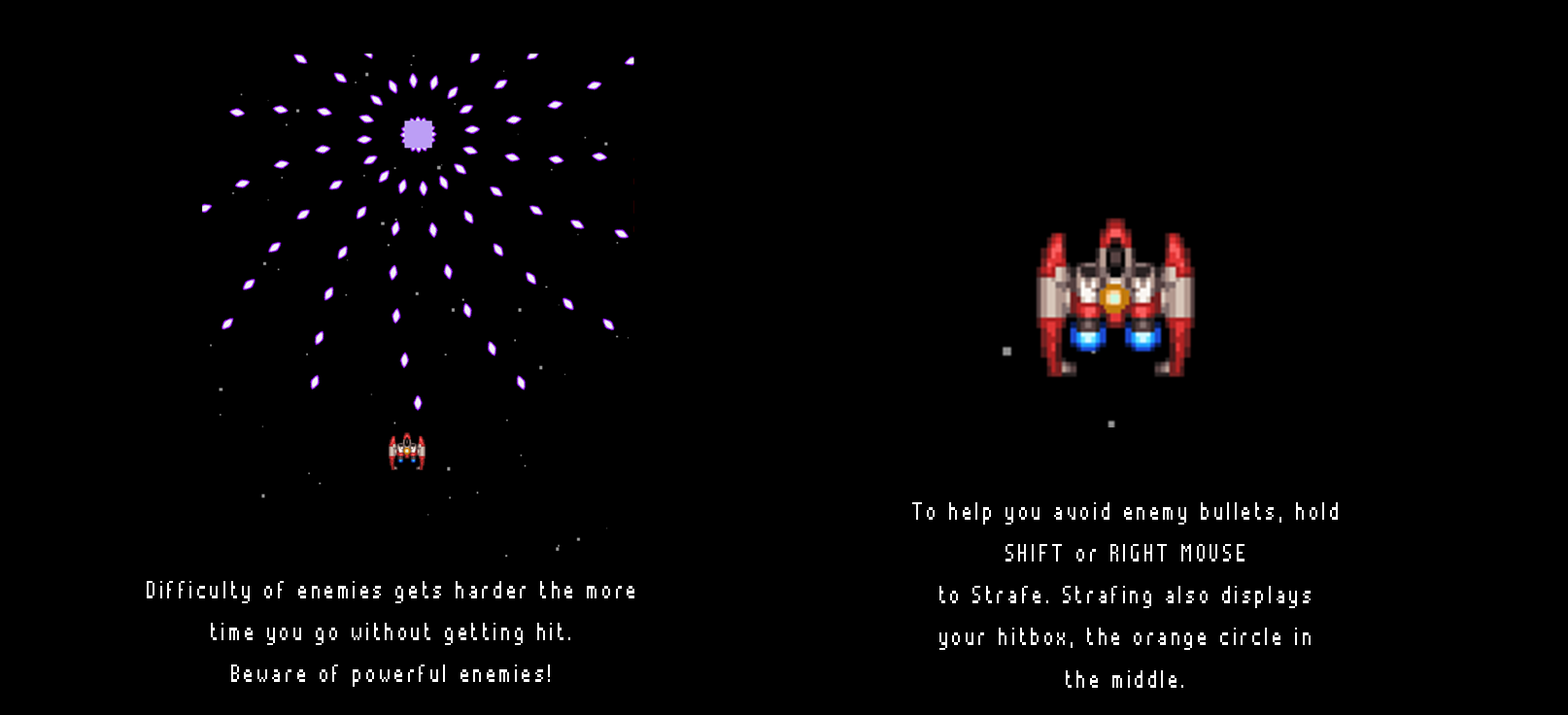
<style>
.page{position:relative;width:1568px;height:715px;background:#000000}
.page>*{position:absolute;margin:0}
.t1{font:40.6px "Alterebro-Pixel-Font";letter-spacing:0.11em;color:#ffffff;scale:0.78 1}
</style>
<div class="page">
<p class="t1" style="left:912px;top:502px;width:426px;height:186px;text-align:center">To help you avoid enemy bullets, hold<br>SHIFT or RIGHT MOUSE<br>to Strafe. Strafing also displays<br>your hitbox, the orange circle in<br>the middle.</p>
<p class="t1" style="left:147px;top:581px;width:487px;height:106px;text-align:center">Difficulty of enemies gets harder the more<br>time you go without getting hit.<br>Beware of powerful enemies!</p>
</div>
